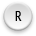
<style>
.page{position:relative;width:36px;height:36px;background:#ffffff}
.page>*{position:absolute;margin:0}
.t1{font:14px "PTSans-Narrow";color:#000000}
</style>
<div class="page">
<p class="t1" style="left:15px;top:11px;width:7px;height:10px">R</p>
</div>
